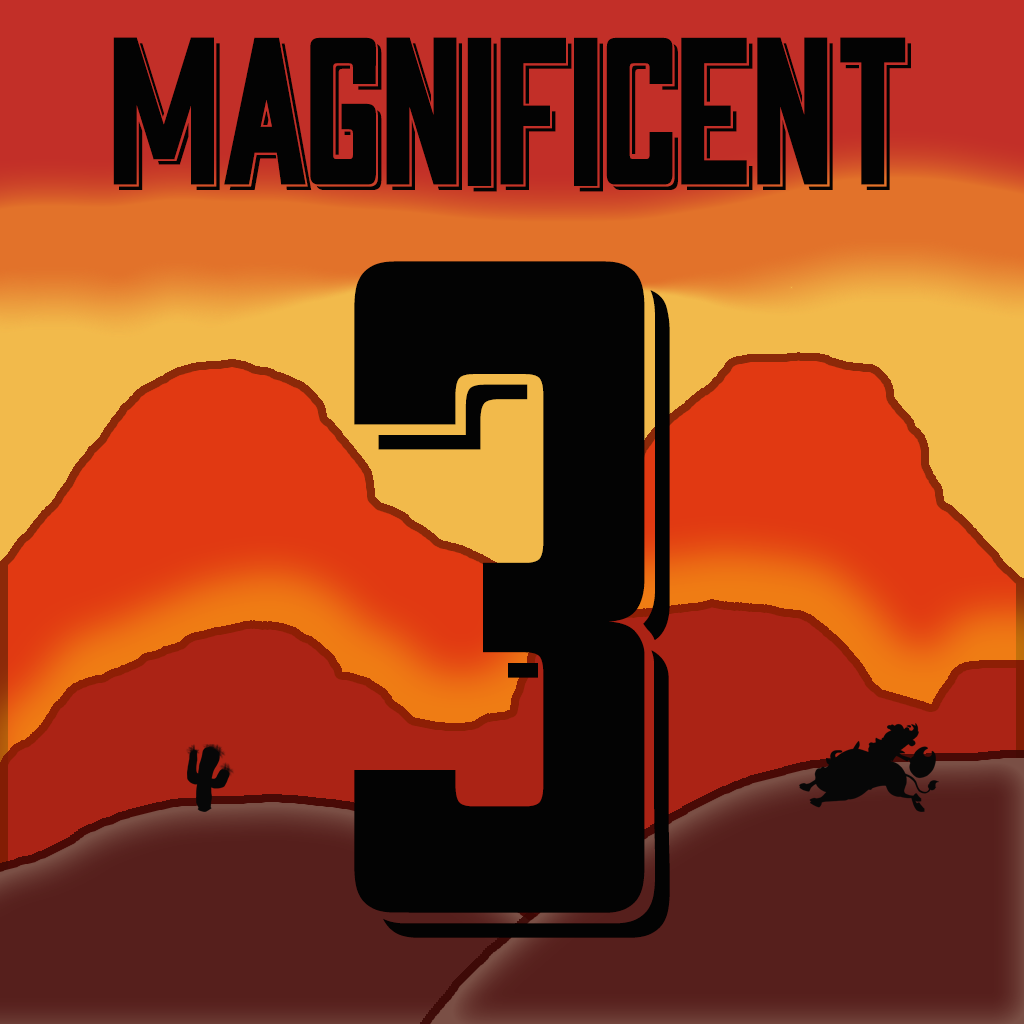
<style>
.page{position:relative;width:1024px;height:1024px;background:#030303}
.page>*{position:absolute;margin:0}
.t1{font:200px "Sahara";letter-spacing:-0.02em;color:#030303}
.t2{font:900.8px "Sahara";letter-spacing:-0.02em;color:#030303}
</style>
<div class="page">
<p class="t1" style="left:113px;top:37px;width:798px;height:155px">MAGNIFICENT</p>
<p class="t2" style="left:354px;top:261px;width:316px;height:677px">3</p>
</div>
